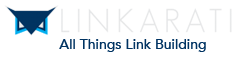
<style>
.page{position:relative;width:237px;height:60px;background:#ffffff}
.page>*{position:absolute;margin:0}
.t1{font:14px "Avenir-Medium";color:#003361}
</style>
<div class="page">
<p class="t1" style="left:59px;top:39px;width:147px;height:13px">All Things Link Building</p>
</div>
